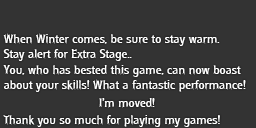
<style>
.page{position:relative;width:256px;height:128px;background:#333333}
.page>*{position:absolute;margin:0}
.t1{font:11.9px/15.4px "Rynders";color:#ffffff;scale:1.21 1}
.t2{font:11.9px/17.4px "Rynders";color:#ffffff;scale:1.21 1}
</style>
<div class="page">
<p class="t1" style="left:3px;top:33px;width:243px;height:94px">When Winter comes, be sure to stay warm.<br>Stay alert for Extra Stage..<br>You, who has bested this game, can now boast<br>about your skills! What a fantastic performance!<br><span class="t2">                  I’m moved!<br>Thank you so much for playing my games!</span></p>
</div>
